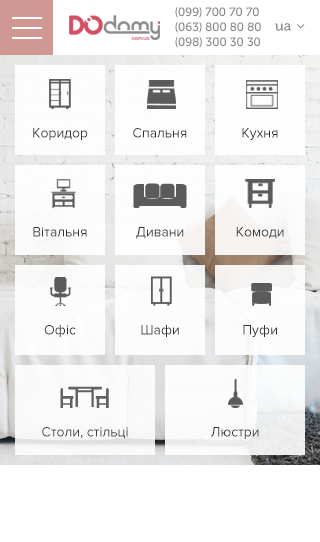
<style>
.page{position:relative;width:320px;height:542px;background:#ffffff}
.page>*{position:absolute;margin:0}
.t1{font:12px "MuseoCyrl-500";color:#898889}
.t2{font:14px "MuseoCyrl-500";color:#898889}
.t3{font:14px "ProximaNova-Regular";color:#333333}
</style>
<div class="page">
<p class="t1" style="left:175px;top:7px;width:84px;height:11px">(099) 700 70 70</p>
<p class="t1" style="left:175px;top:22px;width:86px;height:11px">(063) 800 80 80</p>
<p class="t2" style="left:275px;top:23px;width:16px;height:8px">ua</p>
<p class="t1" style="left:175px;top:37px;width:85px;height:11px">(098) 300 30 30</p>
<p class="t3" style="left:33px;top:128px;width:55px;height:12px">Коридор</p>
<p class="t3" style="left:133px;top:128px;width:54px;height:10px">Спальня</p>
<p class="t3" style="left:242px;top:128px;width:36px;height:12px">Кухня</p>
<p class="t3" style="left:33px;top:227px;width:54px;height:10px">Вітальня</p>
<p class="t3" style="left:136px;top:227px;width:48px;height:12px">Дивани</p>
<p class="t3" style="left:236px;top:227px;width:48px;height:12px">Комоди</p>
<p class="t3" style="left:44px;top:325px;width:32px;height:12px">Офіс</p>
<p class="t3" style="left:141px;top:325px;width:38px;height:12px">Шафи</p>
<p class="t3" style="left:243px;top:325px;width:34px;height:12px">Пуфи</p>
<p class="t3" style="left:42px;top:427px;width:86px;height:12px">Столи, стільці</p>
<p class="t3" style="left:211px;top:427px;width:48px;height:12px">Люстри</p>
</div>
